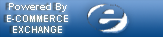
<style>
.page{position:relative;width:163px;height:37px}
.page>*{position:absolute;margin:0}
.t1{font:10px "Arial-BoldMT";color:#ffffff}
.t2{font:9px "Arial-BoldMT";color:#ffffff}
</style>
<div class="page">
<p class="t1" style="left:9px;top:3px;width:58px;height:9px">Powered By</p>
<p class="t2" style="left:7px;top:15px;width:61px;height:18px;text-align:center">E-COMMERCE<br>EXCHANGE</p>
</div>
